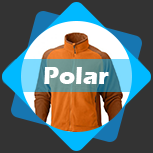
<style>
.page{position:relative;width:153px;height:153px;background:#333333}
.page>*{position:absolute;margin:0}
.t1{font:25px "ErasITC-Bold";color:#ffffff}
</style>
<div class="page">
<p class="t1" style="left:44px;top:67px;width:65px;height:17px">Polar</p>
</div>
